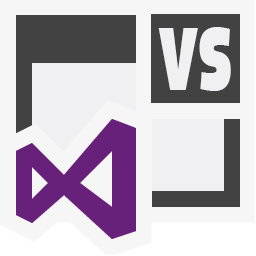
<style>
.page{position:relative;width:256px;height:256px;background:#f6f6f6}
.page>*{position:absolute;margin:0}
.t1{font:89.5px "Humanist531BT-UltraBlackA";color:#f0eff1;scale:0.63 1}
</style>
<div class="page">
<p class="t1" style="left:158px;top:27px;width:73px;height:64px">VS</p>
</div>
